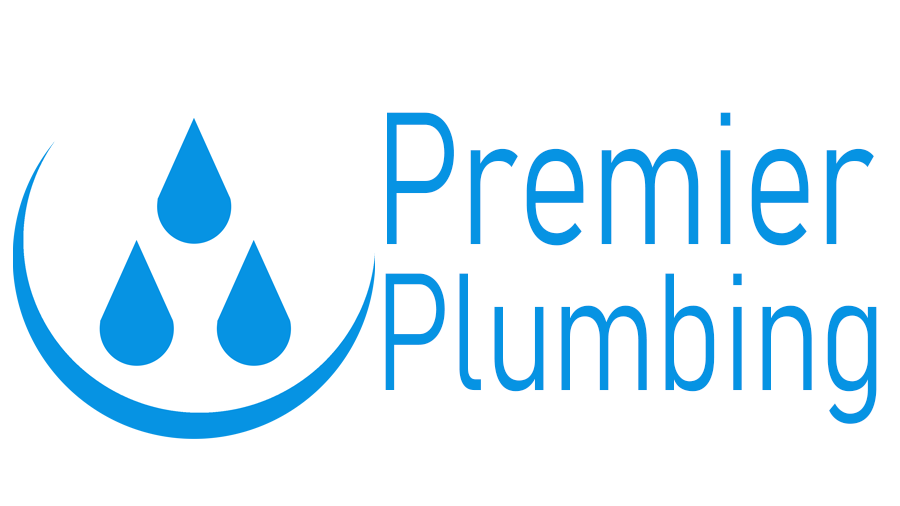
<style>
.page{position:relative;width:900px;height:506px;background:#ffffff}
.page>*{position:absolute;margin:0}
.t1{font:184.5px "Bahnschrift-Light";color:#0693e3;scale:0.74 1}
.t2{font:164px "Bahnschrift-Light";color:#0693e3;scale:0.74 1}
</style>
<div class="page">
<p class="t1" style="left:387px;top:112px;width:487px;height:134px">Premier</p>
<p class="t2" style="left:385px;top:273px;width:492px;height:151px">Plumbing</p>
</div>
